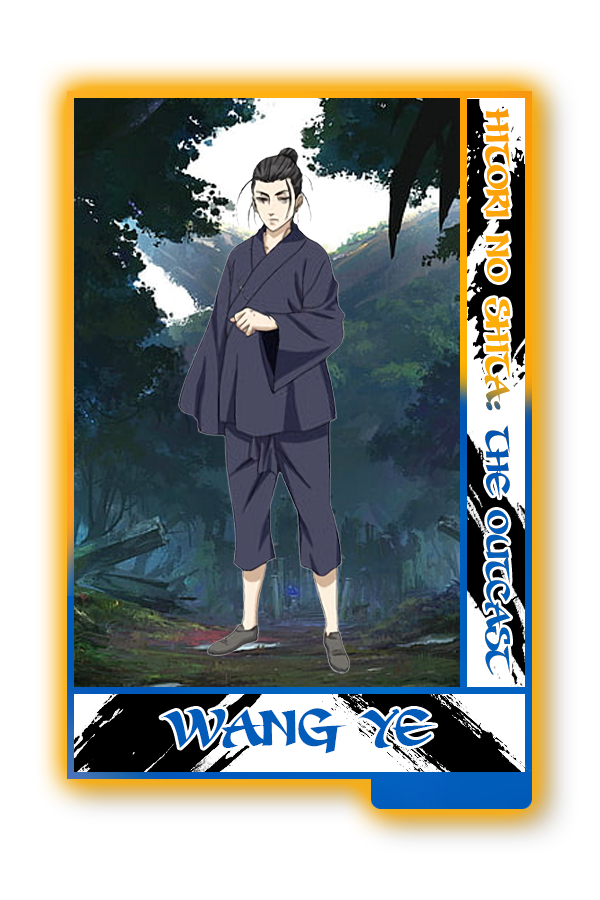
<style>
.page{position:relative;width:600px;height:900px;background:#ffffff}
.page>*{position:absolute;margin:0}
.t1{font:36.7px "SevenSwordsmenBB"}
.t2{font:58.4px "SevenSwordsmenBB";color:#005bb9}
</style>
<div class="page">
<p class="t1" style="left:483px;top:108px;width:28px;height:567px;rotate:90deg">HITORI NO SHITA: THE OUTCAST</p>
<p class="t2" style="left:161px;top:708px;width:275px;height:46px">Wang ye</p>
</div>
